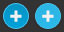
<style>
.page{position:relative;width:64px;height:32px;background:#333333}
.page>*{position:absolute;margin:0}
.t1{font:22px "Arial-BoldMT";color:#f1f1f1}
</style>
<div class="page">
<p class="t1" style="left:10px;top:10px;width:12px;height:12px">+</p>
<p class="t1" style="left:42px;top:10px;width:12px;height:12px">+</p>
</div>
